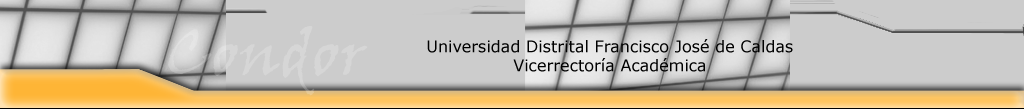
<style>
.page{position:relative;width:1024px;height:109px;background:#cccccc}
.page>*{position:absolute;margin:0}
.t1{font:16px "Verdana";color:#000000}
</style>
<div class="page">
<p class="t1" style="left:427px;top:39px;width:366px;height:33px;text-align:center">Universidad Distrital Francisco José de Caldas<br>Vicerrectoría Académica</p>
</div>
